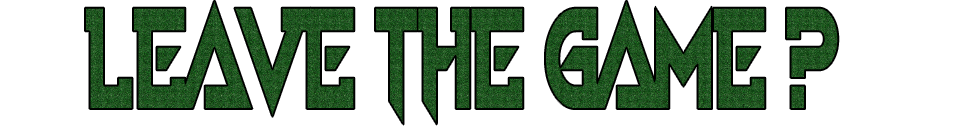
<style>
.page{position:relative;width:960px;height:128px;background:#ffffff}
.page>*{position:absolute;margin:0}
.t1{font:159.2px "VoiceInMyHead";letter-spacing:-0.04em;color:#1d531f;scale:0.61 1}
</style>
<div class="page">
<p class="t1" style="left:85px;top:0px;width:754px;height:125px">leave the game ?</p>
</div>
